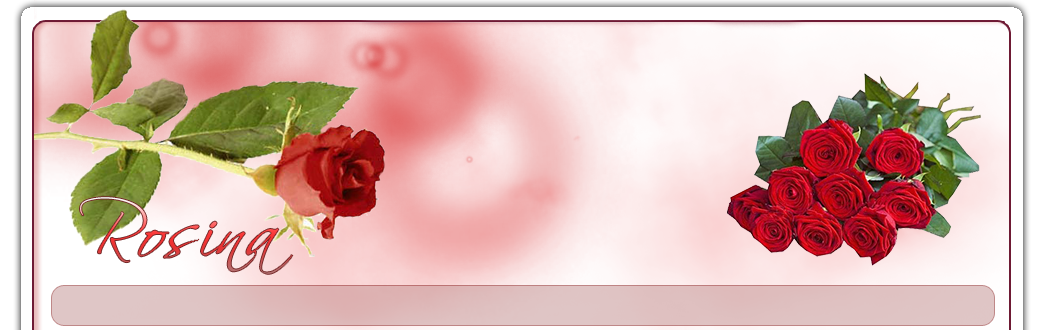
<style>
.page{position:relative;width:1050px;height:330px}
.page>*{position:absolute;margin:0}
.t1{font:72px "Scriptina"}
</style>
<div class="page">
<p class="t1" style="left:80px;top:197px;width:213px;height:77px">Rosina</p>
</div>
